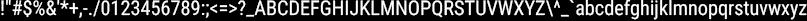
<style>
.page{position:relative;width:807px;height:21px;background:#000000}
.page>*{position:absolute;margin:0}
.t1{font:20.2px "RobotoCondensed-Regular";color:#ffffff}
</style>
<div class="page">
<p class="t1" style="left:1px;top:0px;width:806px;height:20px">!"#$%&amp;'*+,-./0123456789:;&lt;=&gt;?_ABCDEFGHIJKLMNOPQRSTUVWXYZ\^_`abcdefghijklmnopqrstuvwxyz</p>
</div>
